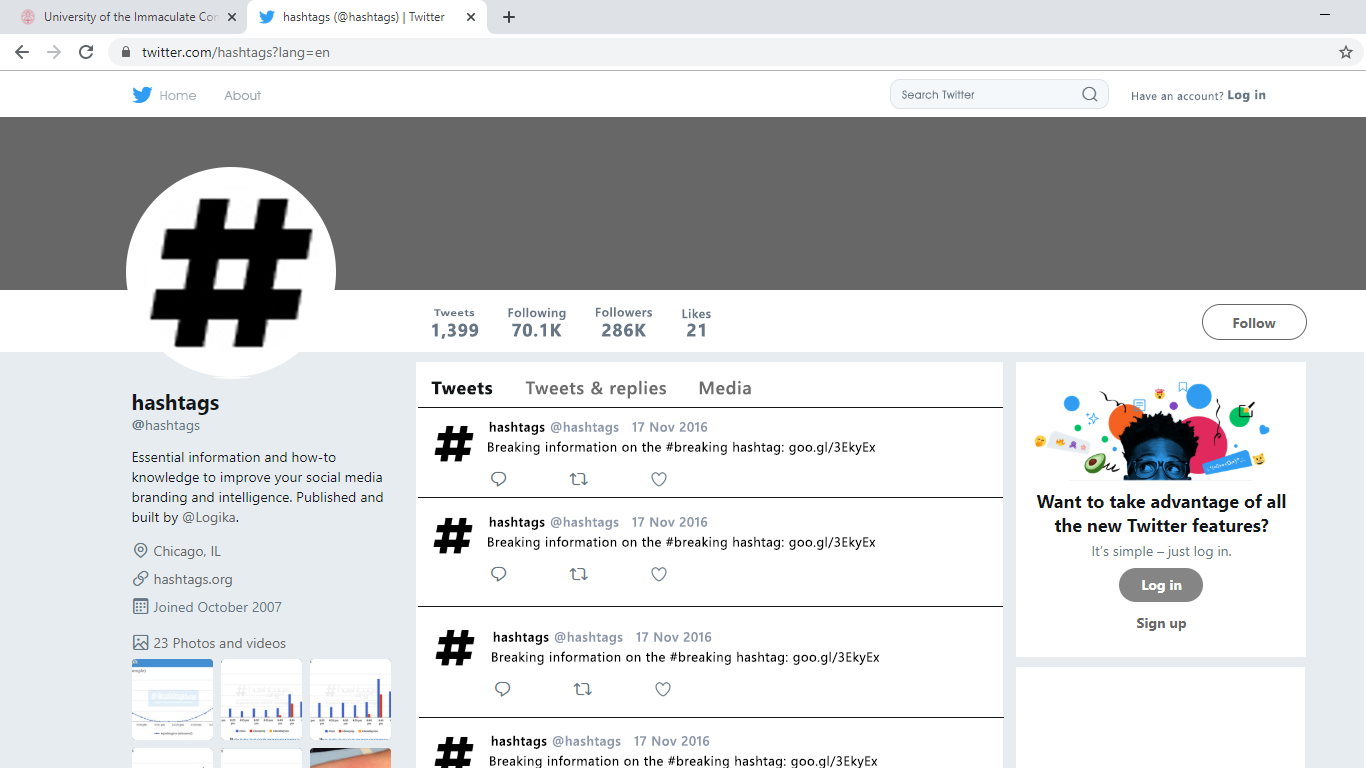
<style>
.page{position:relative;width:1366px;height:768px;background:#ffffff}
.page>*{position:absolute;margin:0}
.t1{font:12.5px "SegoeUI-Bold";letter-spacing:0.04em;color:#667686}
.t2{font:12.9px "AvantGardeITCbyBT-Book";letter-spacing:0.04em;color:#a6afb5}
.t3{font:12.9px "AvantGardeITCbyBT-Book";letter-spacing:0.04em;color:#99a3aa}
.t4{font:11.2px "AvantGardeITCbyBT-Book";letter-spacing:0.04em;color:#667686}
.t5{font:11.2px "SegoeUI";letter-spacing:0.04em;color:#667686}
.t6{font:9.4px "SegoeUI-SemiBold";letter-spacing:0.04em;color:#667686;scale:1.3 1}
.t7{font:12.5px "SegoeUI-SemiBold";letter-spacing:0.04em;color:#667686}
.t8{font:17.9px "SegoeUI-Bold";letter-spacing:0.04em;color:#667686}
.t9{font:17.9px "SegoeUI-Bold";letter-spacing:0.04em;color:#14171a}
.t10{font:17.9px "SegoeUI-SemiBold";letter-spacing:0.04em;color:#6e6d6d}
.t11{font:17.9px "SegoeUI-SemiBold";letter-spacing:0.04em;color:#6d6d6d}
.t12{font:13.3px "SegoeUI-SemiBold";letter-spacing:0.04em;color:#000000}
.t13{font:13.3px "SegoeUI-SemiBold";letter-spacing:0.04em;color:#8d98ab}
.t14{font:13.3px "SegoeUI";letter-spacing:0.04em;color:#000000}
</style>
<div class="page">
<p class="t1" style="left:1228px;top:89px;width:38px;height:13px">Log in</p>
<p class="t2" style="left:160px;top:91px;width:37px;height:9px">Home</p>
<p class="t3" style="left:224px;top:91px;width:37px;height:9px">About</p>
<p class="t4" style="left:902px;top:90px;width:73px;height:9px">Search Twitter</p>
<p class="t5" style="left:1132px;top:91px;width:92px;height:10px">Have an account?</p>
<p class="t6" style="left:434px;top:309px;width:41px;height:8px">Tweets</p>
<p class="t7" style="left:508px;top:307px;width:58px;height:13px">Following</p>
<p class="t7" style="left:596px;top:307px;width:56px;height:10px">Followers</p>
<p class="t7" style="left:682px;top:308px;width:29px;height:11px">Likes</p>
<p class="t8" style="left:432px;top:323px;width:47px;height:16px">1,399</p>
<p class="t8" style="left:512px;top:323px;width:50px;height:14px">70.1K</p>
<p class="t8" style="left:602px;top:323px;width:44px;height:14px">286K</p>
<p class="t8" style="left:687px;top:323px;width:18px;height:14px">21</p>
<p class="t9" style="left:431px;top:381px;width:62px;height:14px">Tweets</p>
<p class="t10" style="left:525px;top:380px;width:141px;height:19px">Tweets &amp; replies</p>
<p class="t11" style="left:699px;top:380px;width:52px;height:15px">Media</p>
<p class="t12" style="left:489px;top:421px;width:56px;height:14px">hashtags</p>
<p class="t13" style="left:550px;top:421px;width:69px;height:14px">@hashtags</p>
<p class="t13" style="left:632px;top:422px;width:76px;height:10px">17 Nov 2016</p>
<p class="t14" style="left:488px;top:441px;width:388px;height:14px">Breaking information on the #breaking hashtag: goo.gl/3EkyEx</p>
<p class="t12" style="left:489px;top:516px;width:56px;height:14px">hashtags</p>
<p class="t13" style="left:550px;top:516px;width:69px;height:14px">@hashtags</p>
<p class="t13" style="left:632px;top:517px;width:76px;height:10px">17 Nov 2016</p>
<p class="t14" style="left:488px;top:536px;width:388px;height:14px">Breaking information on the #breaking hashtag: goo.gl/3EkyEx</p>
<p class="t12" style="left:493px;top:631px;width:56px;height:14px">hashtags</p>
<p class="t13" style="left:554px;top:631px;width:69px;height:14px">@hashtags</p>
<p class="t13" style="left:636px;top:632px;width:76px;height:10px">17 Nov 2016</p>
<p class="t14" style="left:492px;top:651px;width:388px;height:14px">Breaking information on the #breaking hashtag: goo.gl/3EkyEx</p>
<p class="t12" style="left:491px;top:735px;width:56px;height:14px">hashtags</p>
<p class="t13" style="left:552px;top:735px;width:69px;height:14px">@hashtags</p>
<p class="t13" style="left:634px;top:736px;width:76px;height:10px">17 Nov 2016</p>
<p class="t14" style="left:490px;top:755px;width:388px;height:14px">Breaking information on the #breaking hashtag: goo.gl/3EkyEx</p>
</div>
